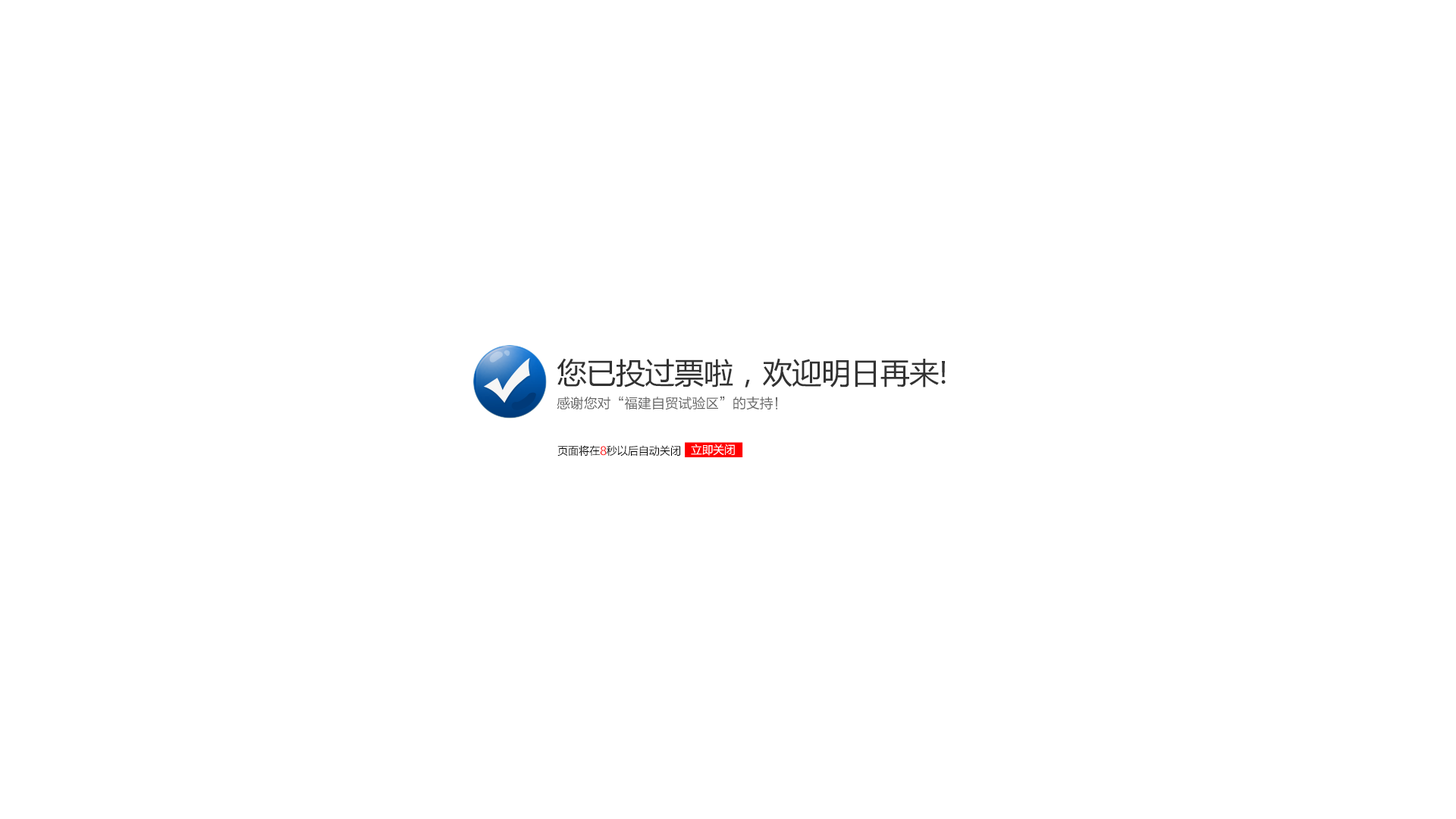
<style>
.page{position:relative;width:1456px;height:819px;background:#ffffff}
.page>*{position:absolute;margin:0}
.t1{font:29.6px "MicrosoftYaHei";letter-spacing:-0.01em;color:#323232}
.t2{font:13.9px "FZLTHK--GBK1-0";letter-spacing:-0.01em;color:#646464}
.t3{font:11.1px "FZLTHK--GBK1-0";letter-spacing:-0.01em;color:#000000;scale:0.97 1}
.t4{font:11.1px "FZLTHK--GBK1-0";letter-spacing:-0.01em;color:#ff0000;scale:0.97 1}
.t5{font:11.1px "MicrosoftYaHei";letter-spacing:-0.01em;color:#ffffff}
</style>
<div class="page">
<p class="t1" style="left:557px;top:358px;width:389px;height:30px">您已投过票啦，欢迎明日再来!</p>
<p class="t2" style="left:557px;top:396px;width:220px;height:14px">感谢您对“福建自贸试验区”的支持！</p>
<p class="t3" style="left:557px;top:445px;width:123px;height:12px">页面将在<span class="t4">8</span>秒以后自动关闭</p>
<p class="t5" style="left:691px;top:444px;width:44px;height:12px">立即关闭</p>
</div>
